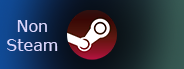
<style>
.page{position:relative;width:184px;height:69px}
.page>*{position:absolute;margin:0}
.t1{font:16px "Verdana";color:#dad8ff}
</style>
<div class="page">
<p class="t1" style="left:7px;top:20px;width:51px;height:31px;text-align:center">Non<br>Steam</p>
</div>
